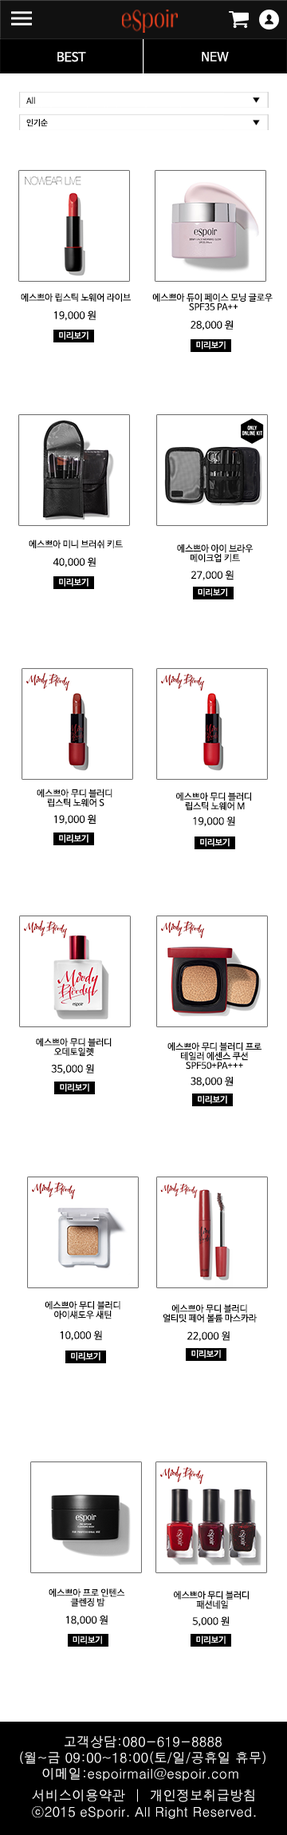
<style>
.page{position:relative;width:287px;height:1835px;background:#ffffff}
.page>*{position:absolute;margin:0}
.t1{font:12.3px "NanumBarunGothic";color:#ffffff}
.t2{font:8px "NanumBarunGothic";color:#000000}
.t3{font:9px "NanumBarunGothic";color:#000000}
.t4{font:9px/9px "NanumBarunGothic";color:#000000}
.t5{font:10px "NanumBarunGothic";color:#000000}
.t6{font:8.4px "NanumBarunGothic";color:#ffffff}
.t7{font:13.3px "H2gtrM";color:#ffffff}
</style>
<div class="page">
<p class="t1" style="left:57px;top:52px;width:29px;height:10px">BEST</p>
<p class="t1" style="left:202px;top:52px;width:27px;height:9px">NEW</p>
<p class="t2" style="left:26px;top:97px;width:9px;height:7px">All</p>
<p class="t2" style="left:26px;top:119px;width:22px;height:8px">인기순</p>
<p class="t3" style="left:21px;top:293px;width:110px;height:9px">에스쁘아 립스틱 노웨어 라이브</p>
<p class="t4" style="left:152px;top:293px;width:121px;height:18px;text-align:center">에스쁘아 듀이 페이스 모닝 글로우 <br>SPF35 PA++</p>
<p class="t5" style="left:54px;top:311px;width:42px;height:10px">19,000 원</p>
<p class="t5" style="left:191px;top:320px;width:42px;height:11px">28,000 원</p>
<p class="t6" style="left:59px;top:331px;width:30px;height:9px">미리보기</p>
<p class="t6" style="left:196px;top:341px;width:30px;height:9px">미리보기</p>
<p class="t3" style="left:29px;top:540px;width:94px;height:8px">에스쁘아 미니 브러쉬 키트</p>
<p class="t4" style="left:177px;top:544px;width:77px;height:19px;text-align:center">에스쁘아 아이 브라우<br>메이크업 키트</p>
<p class="t5" style="left:53px;top:557px;width:43px;height:11px">40,000 원</p>
<p class="t6" style="left:59px;top:578px;width:30px;height:9px">미리보기</p>
<p class="t5" style="left:192px;top:570px;width:42px;height:10px">27,000 원</p>
<p class="t6" style="left:198px;top:588px;width:30px;height:8px">미리보기</p>
<p class="t4" style="left:37px;top:789px;width:76px;height:18px;text-align:center">에스쁘아 무디 블러디 <br>립스틱 노웨어 S</p>
<p class="t4" style="left:176px;top:792px;width:75px;height:19px;text-align:center">에스쁘아 무디 블러디 <br>립스틱 노웨어 M</p>
<p class="t5" style="left:54px;top:814px;width:42px;height:11px">19,000 원</p>
<p class="t5" style="left:193px;top:817px;width:43px;height:10px">19,000 원</p>
<p class="t6" style="left:59px;top:834px;width:30px;height:9px">미리보기</p>
<p class="t6" style="left:200px;top:838px;width:30px;height:9px">미리보기</p>
<p class="t4" style="left:36px;top:1038px;width:76px;height:18px;text-align:center">에스쁘아 무디 블러디<br>오데토일렛</p>
<p class="t4" style="left:168px;top:1043px;width:94px;height:27px;text-align:center">에스쁘아 무디 블러디 프로<br>테일러 에센스 쿠션<br>SPF50+PA+++</p>
<p class="t5" style="left:51px;top:1064px;width:43px;height:11px">35,000 원</p>
<p class="t6" style="left:60px;top:1083px;width:29px;height:9px">미리보기</p>
<p class="t5" style="left:191px;top:1077px;width:42px;height:10px">38,000 원</p>
<p class="t6" style="left:198px;top:1095px;width:30px;height:9px">미리보기</p>
<p class="t4" style="left:45px;top:1301px;width:76px;height:19px;text-align:center">에스쁘아 무디 블러디<br>아이섀도우 새틴</p>
<p class="t4" style="left:163px;top:1304px;width:95px;height:19px;text-align:center">에스쁘아 무디 블러디<br>얼티밋 페어 볼륨 마스카라</p>
<p class="t5" style="left:60px;top:1331px;width:42px;height:10px">10,000 원</p>
<p class="t5" style="left:188px;top:1332px;width:42px;height:10px">22,000 원</p>
<p class="t6" style="left:192px;top:1350px;width:29px;height:9px">미리보기</p>
<p class="t6" style="left:71px;top:1352px;width:30px;height:9px">미리보기</p>
<p class="t4" style="left:49px;top:1589px;width:76px;height:18px;text-align:center">에스쁘아 프로 인텐스 <br>클렌징 밤</p>
<p class="t4" style="left:174px;top:1591px;width:75px;height:18px;text-align:center">에스쁘아 무디 블러디 <br>패션네일</p>
<p class="t5" style="left:66px;top:1615px;width:42px;height:10px">18,000 원</p>
<p class="t5" style="left:192px;top:1617px;width:38px;height:10px">5,000 원</p>
<p class="t6" style="left:73px;top:1636px;width:29px;height:9px">미리보기</p>
<p class="t6" style="left:196px;top:1636px;width:30px;height:9px">미리보기</p>
<p class="t7" style="left:20px;top:1736px;width:246px;height:45px;text-align:center">고객상담:080-619-8888<br>(월~금 09:00~18:00(토/일/공휴일 휴무)<br>이메일:espoirmail@espoir.com</p>
<p class="t7" style="left:32px;top:1789px;width:223px;height:14px">서비스이용약관  |  개인정보취급방침</p>
<p class="t7" style="left:32px;top:1807px;width:224px;height:12px">ⓒ2015 eSporir. All Right Reserved.</p>
</div>
